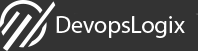
<style>
.page{position:relative;width:198px;height:51px;background:#333333}
.page>*{position:absolute;margin:0}
.t1{font:24px "MyriadPro-Regular";color:#ffffff}
</style>
<div class="page">
<p class="t1" style="left:56px;top:16px;width:129px;height:22px">DevopsLogix</p>
</div>
